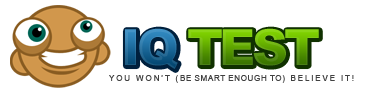
<style>
.page{position:relative;width:378px;height:94px;background:#ffffff}
.page>*{position:absolute;margin:0}
.t1{font:50px "Arial-Black";letter-spacing:-0.075em;text-transform:uppercase}
.t2{font:8.3px "ArialMT";letter-spacing:0.05em;color:#414141;text-transform:uppercase}
.t3{font:8.3px "ArialMT";letter-spacing:0.2em;color:#414141;text-transform:uppercase}
</style>
<div class="page">
<p class="t1" style="left:125px;top:28px;width:53px;height:41px">IQ</p>
<p class="t1" style="left:188px;top:28px;width:131px;height:38px">Test</p>
<p class="t2" style="left:109px;top:75px;width:245px;height:8px"><span class="t3">You won’t (</span>be smart enough to<span class="t3">) believe it!</span></p>
</div>
